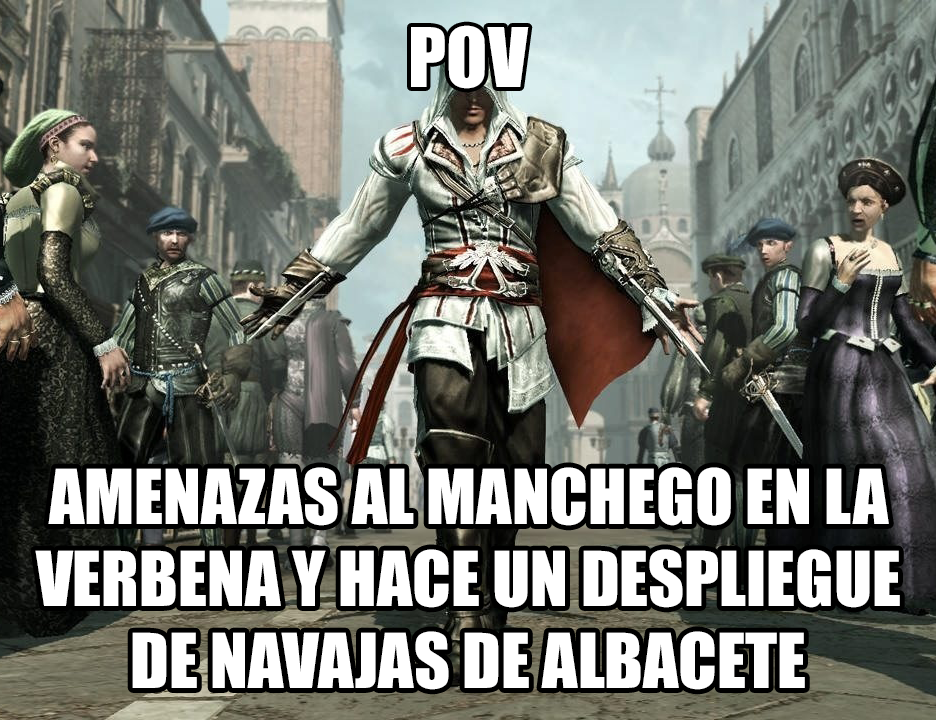
<style>
.page{position:relative;width:936px;height:720px}
.page>*{position:absolute;margin:0}
.t1{font:75.7px "Impact";color:#ffffff}
.t2{font:69.9px "Impact";color:#ffffff}
</style>
<div class="page">
<p class="t1" style="left:411px;top:25px;width:118px;height:64px">POV</p>
<p class="t2" style="left:35px;top:467px;width:865px;height:223px;text-align:center">AMENAZAS AL MANCHEGO EN LA<br>VERBENA Y HACE UN DESPLIEGUE<br>DE NAVAJAS DE ALBACETE</p>
</div>
